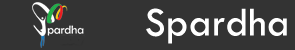
<style>
.page{position:relative;width:295px;height:50px;background:#333333}
.page>*{position:absolute;margin:0}
.t1{font:41.7px "TwCenMT-Regular";color:#ffffff}
</style>
<div class="page">
<p class="t1" style="left:146px;top:8px;width:141px;height:36px">Spardha</p>
</div>
